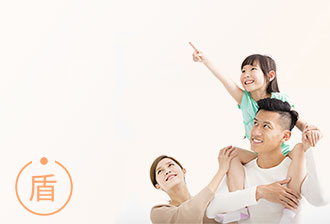
<style>
.page{position:relative;width:330px;height:224px}
.page>*{position:absolute;margin:0}
.t1{font:30px "SourceHanSansCN-Regular";color:#ffa569}
</style>
<div class="page">
<p class="t1" style="left:29px;top:174px;width:28px;height:28px">盾</p>
</div>
